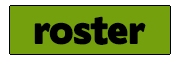
<style>
.page{position:relative;width:180px;height:60px;background:#75a00e}
.page>*{position:absolute;margin:0}
.t1{font:36px "BorisBlackBloxx";color:#000000}
</style>
<div class="page">
<p class="t1" style="left:34px;top:16px;width:112px;height:29px">roster</p>
</div>
